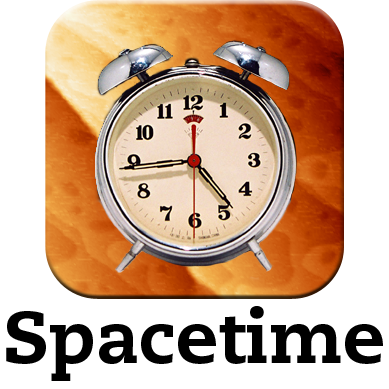
<style>
.page{position:relative;width:389px;height:389px;background:#ffffff}
.page>*{position:absolute;margin:0}
.t1{font:72.9px "Caecilia-Heavy";color:#000000}
</style>
<div class="page">
<p class="t1" style="left:6px;top:306px;width:377px;height:75px">Spacetime</p>
</div>
